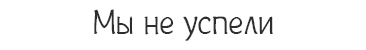
<style>
.page{position:relative;width:366px;height:50px;background:#ffffff}
.page>*{position:absolute;margin:0}
.t1{font:35px "Plainot";color:#2e2e2e}
</style>
<div class="page">
<p class="t1" style="left:94px;top:9px;width:179px;height:32px">Мы не успели</p>
</div>
